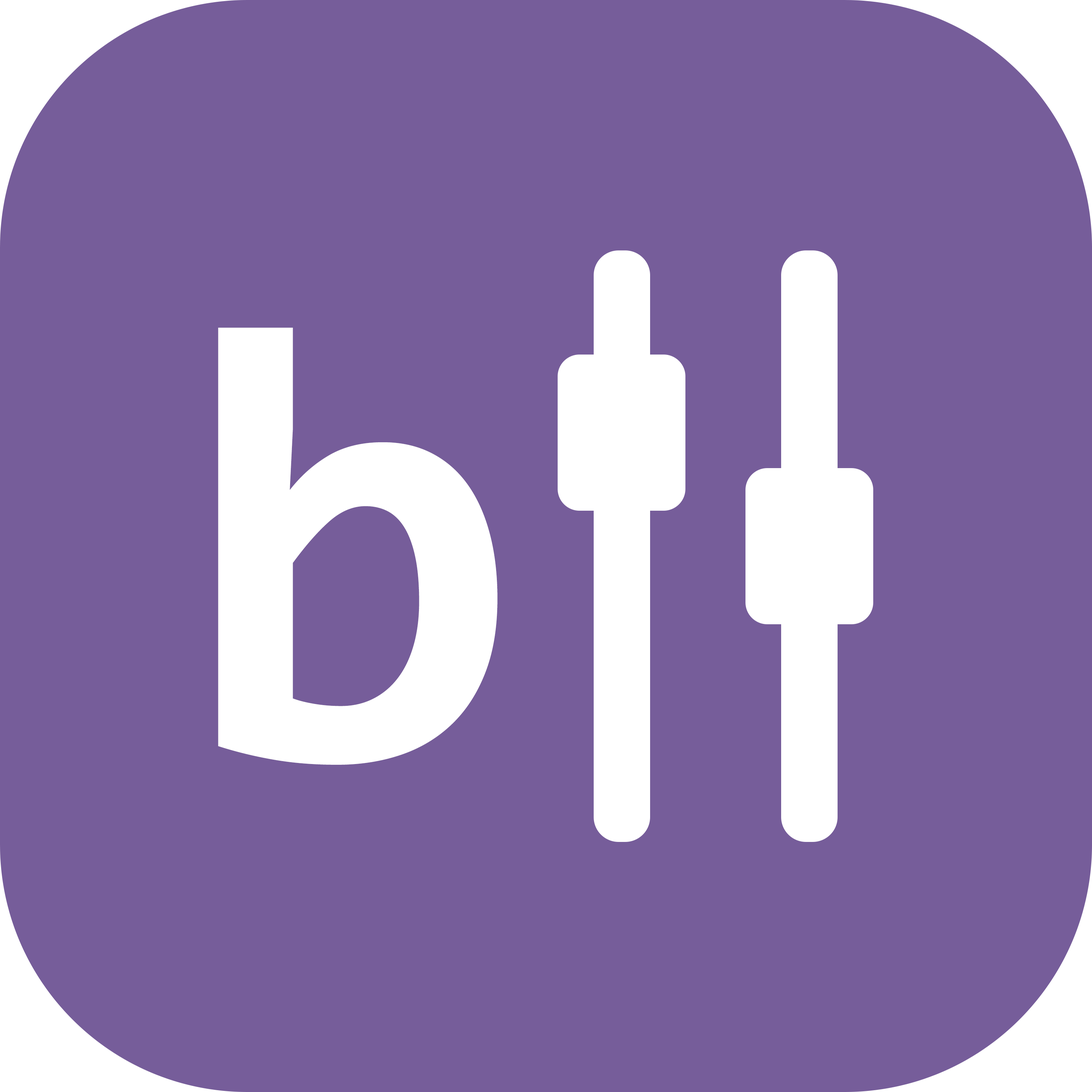
<style>
.page{position:relative;width:1092px;height:1092px;background:#765d9a}
.page>*{position:absolute;margin:0}
.t1{font:625.3px "Consolas-Bold";color:#ffffff}
</style>
<div class="page">
<p class="t1" style="left:218px;top:328px;width:280px;height:437px">b</p>
</div>
